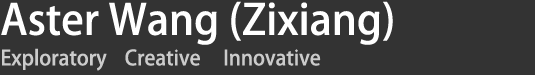
<style>
.page{position:relative;width:535px;height:75px;background:#333333}
.page>*{position:absolute;margin:0}
.t1{font:41.9px "AdobeHeitiStd-Regular";color:#ffffff}
.t2{font:20.6px "AdobeHeitiStd-Regular";color:#cbcbcb}
</style>
<div class="page">
<p class="t1" style="left:1px;top:1px;width:392px;height:44px">Aster Wang (Zixiang)</p>
<p class="t2" style="left:2px;top:48px;width:319px;height:23px">Exploratory    Creative     Innovative</p>
</div>
